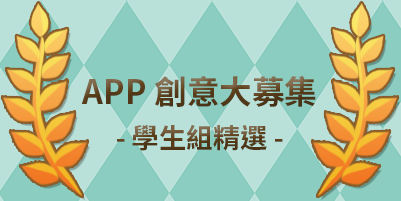
<style>
.page{position:relative;width:401px;height:201px;background:#8bcdc0}
.page>*{position:absolute;margin:0}
.t1{font:32.5px/48.8px "NotoSansCJKtc-Bold";color:#5d401b}
.t2{font:27.1px/48.8px "NotoSansCJKtc-Bold";color:#5d401b}
</style>
<div class="page">
<p class="t1" style="left:81px;top:76px;width:235px;height:75px;text-align:center">APP 創意大募集<br><span class="t2">- 學生組精選 -</span></p>
</div>
